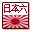
<style>
.page{position:relative;width:33px;height:32px;background:#ffffff}
.page>*{position:absolute;margin:0}
.t1{font:10.4px "SimSun";letter-spacing:-0.25em;color:#ae0012}
</style>
<div class="page">
<p class="t1" style="left:4px;top:4px;width:23px;height:9px">日本六</p>
</div>
